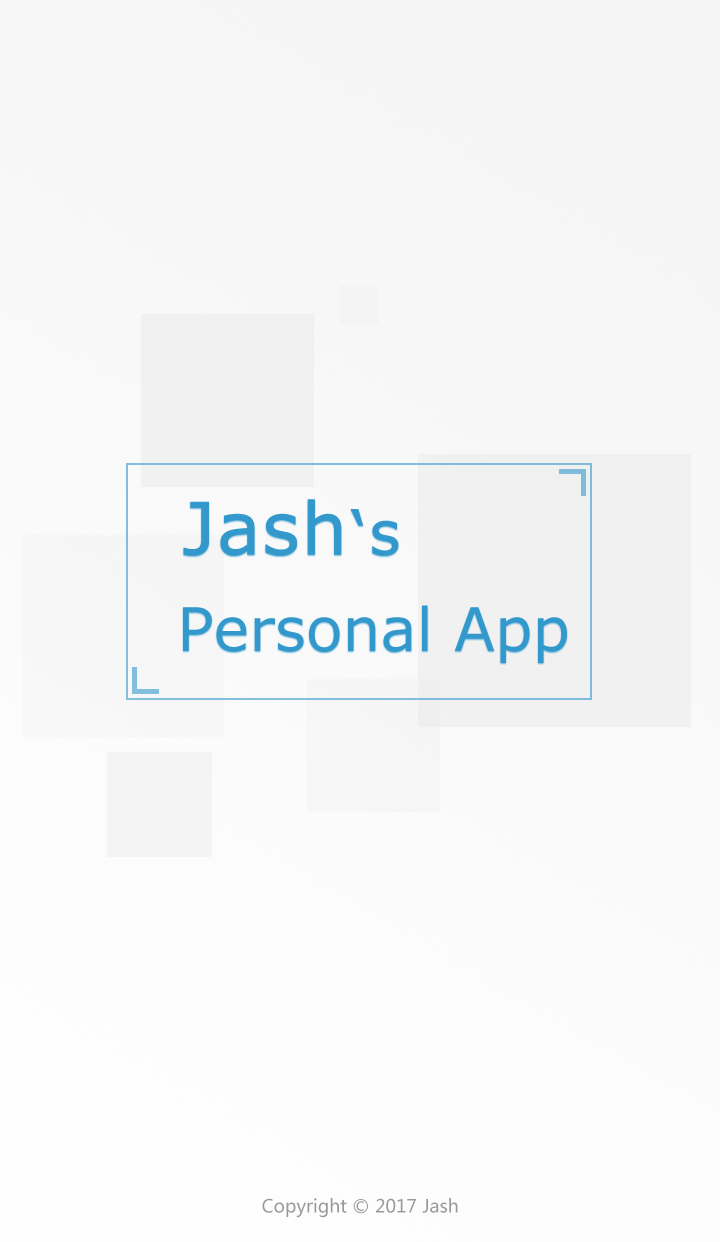
<style>
.page{position:relative;width:720px;height:1242px}
.page>*{position:absolute;margin:0}
.t1{font:72px "Verdana";color:#3399cc;font-weight:bold}
.t2{font:60px "Verdana";color:#3399cc;font-weight:bold}
.t3{font:60px "Verdana";color:#3399cc}
.t4{font:18px "MicrosoftYaHei";color:#999999}
</style>
<div class="page">
<p class="t1" style="left:183px;top:499px;width:159px;height:57px">Jash</p>
<p class="t2" style="left:350px;top:509px;width:49px;height:47px">‘s</p>
<p class="t3" style="left:183px;top:605px;width:384px;height:58px">Personal App</p>
<p class="t4" style="left:262px;top:1198px;width:196px;height:20px">Copyright © 2017 Jash</p>
</div>
